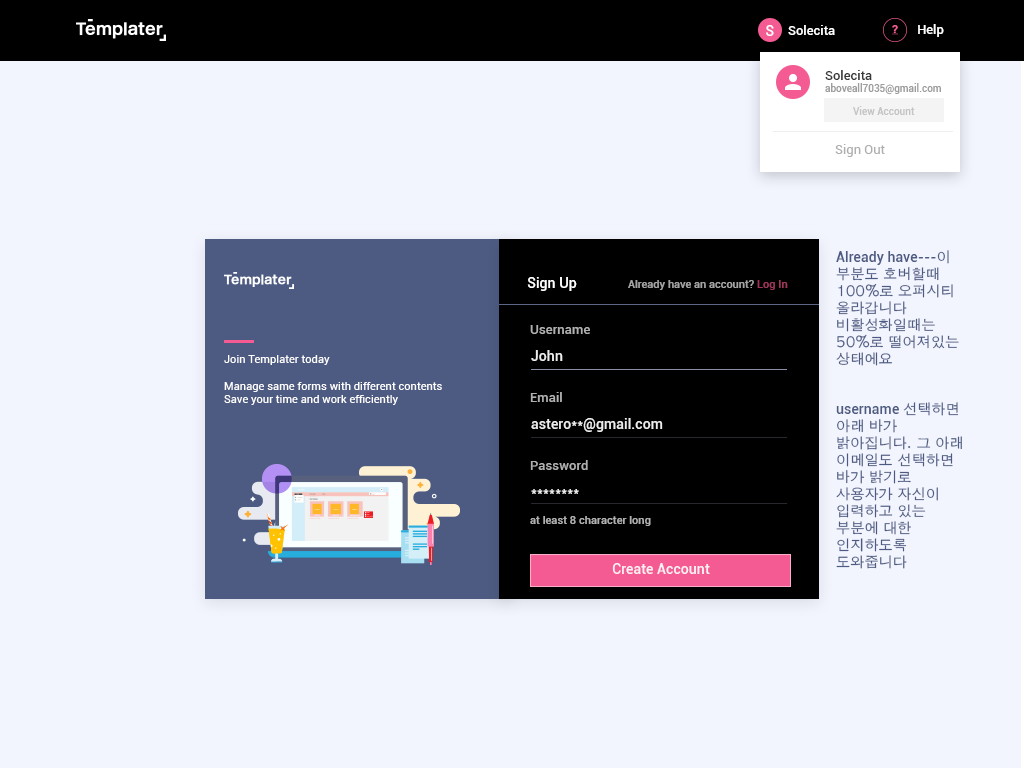
<style>
.page{position:relative;width:1024px;height:768px;background:#f2f5fe}
.page>*{position:absolute;margin:0}
.t1{font:14.2px "Roboto-Medium";color:#ffffff}
.t2{font:13px "Roboto-Medium";color:#ffffff}
.t3{font:10px "Roboto-Medium";color:#8f8f8f}
.t4{font:13px "Roboto-Medium";color:#000000}
.t5{font:10px "Roboto-Medium";color:#c4c4c4}
.t6{font:13px "Roboto-Regular";color:#aeaeae}
.t7{font:14.2px "AppleGothic";color:#4d5b82}
.t8{font:14.2px "Roboto-Medium";color:#4d5b82}
.t9{font:14px "Roboto-Medium";color:#ffffff}
.t10{font:11px "Roboto-Medium";color:#a3a3a3}
.t11{font:13px/17px "Roboto-Medium";color:#b0b0b0}
.t12{font:14px/17px "Roboto-Medium";color:#ffffff}
.t13{font:11px "Roboto-Regular";color:#ffffff}
.t14{font:11px "Roboto-Medium";color:#b0b0b0}
</style>
<div class="page">
<p class="t1" style="left:766px;top:25px;width:8px;height:11px">S</p>
<p class="t2" style="left:788px;top:25px;width:47px;height:10px">Solecita</p>
<p class="t2" style="left:918px;top:24px;width:26px;height:13px">Help</p>
<p class="t3" style="left:825px;top:70px;width:116px;height:25px;opacity:0.89"><span class="t4">Solecita<br></span>aboveall7035@gmail.com</p>
<p class="t5" style="left:853px;top:106px;width:62px;height:9px">View Account</p>
<p class="t6" style="left:835px;top:144px;width:50px;height:13px">Sign Out</p>
<p class="t7" style="left:836px;top:250px;width:123px;height:116px"><span class="t8">Already have---</span>이 부분도 호버할때 100%로 오퍼시티 올라갑니다<br>비활성화일때는 50%로 떨어져있는 상태에요</p>
<p class="t9" style="left:527px;top:277px;width:50px;height:14px">Sign Up</p>
<p class="t10" style="left:628px;top:280px;width:160px;height:10px">Already have an account? Log In</p>
<p class="t11" style="left:530px;top:325px;width:60px;height:145px">Username<br><br><br><br>Email<br><br><br><br>Password</p>
<p class="t12" style="left:531px;top:350px;width:132px;height:144px;opacity:0.89">John<br><br><br><br>astero**@gmail.com<br><br><br><br>********</p>
<p class="t13" style="left:224px;top:355px;width:218px;height:50px">Join Templater today<br><br>Manage same forms with different contents<br>Save your time and work efficiently</p>
<p class="t7" style="left:836px;top:402px;width:126px;height:167px"><span class="t8">username </span>선택하면 아래 바가 밝아집니다. 그 아래 이메일도 선택하면 바가 밝기로 사용자가 자신이 입력하고 있는 부분에 대한 인지하도록 도와줍니다</p>
<p class="t14" style="left:530px;top:516px;width:121px;height:10px">at least 8 character long</p>
<p class="t9" style="left:612px;top:563px;width:98px;height:11px;opacity:0.89">Create Account</p>
</div>
